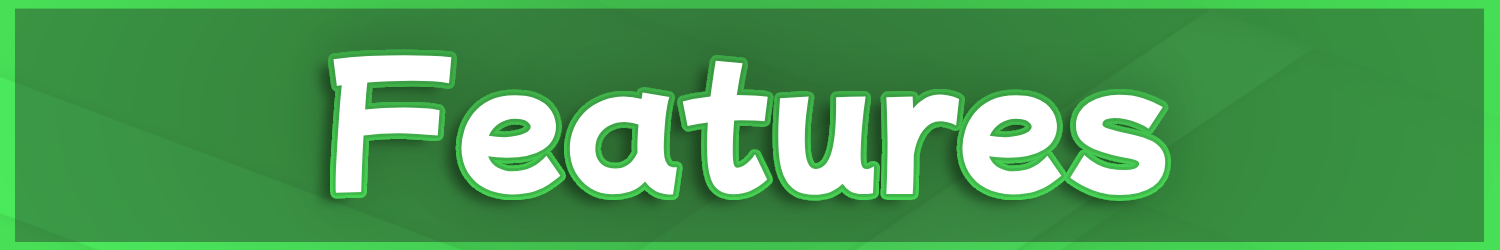
<style>
.page{position:relative;width:1500px;height:250px}
.page>*{position:absolute;margin:0}
.t1{font:156.8px "MochiyPopOne-Regular";color:#ffffff}
</style>
<div class="page">
<p class="t1" style="left:333px;top:55px;width:833px;height:140px">Features</p>
</div>
